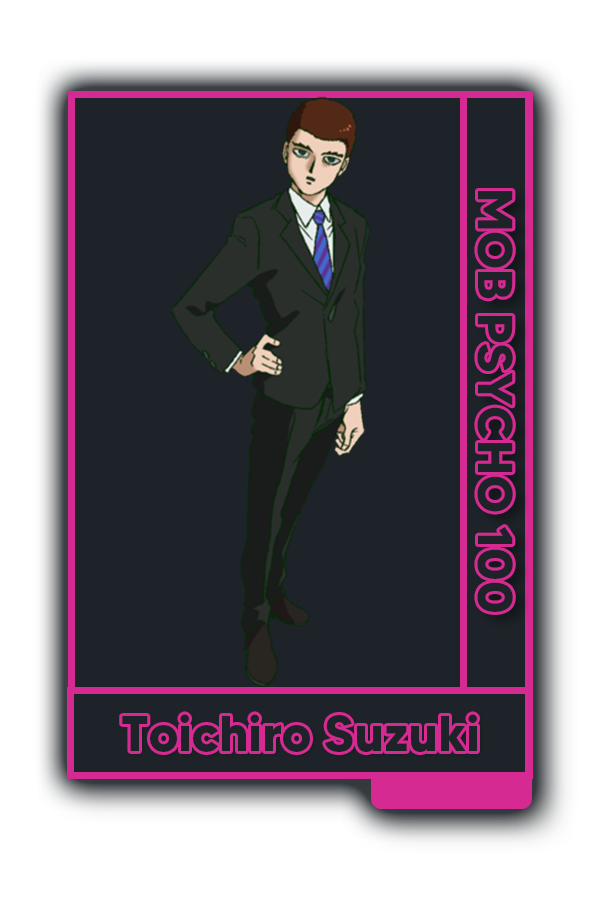
<style>
.page{position:relative;width:600px;height:900px;background:#1d2328}
.page>*{position:absolute;margin:0}
.t1{font:48.8px "MADETOMMY-Bold";color:#1d2328}
.t2{font:49.7px "MADETOMMY-Bold";color:#1d2328}
</style>
<div class="page">
<p class="t1" style="left:477px;top:191px;width:36px;height:421px;rotate:90deg">MOB PSYCHO 100</p>
<p class="t2" style="left:122px;top:714px;width:355px;height:38px">Toichiro Suzuki</p>
</div>
